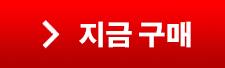
<style>
.page{position:relative;width:225px;height:68px}
.page>*{position:absolute;margin:0}
.t1{font:27px "AdobeGothicStd-Bold";color:#ffffff}
</style>
<div class="page">
<p class="t1" style="left:79px;top:21px;width:112px;height:27px">지금 구매</p>
</div>
